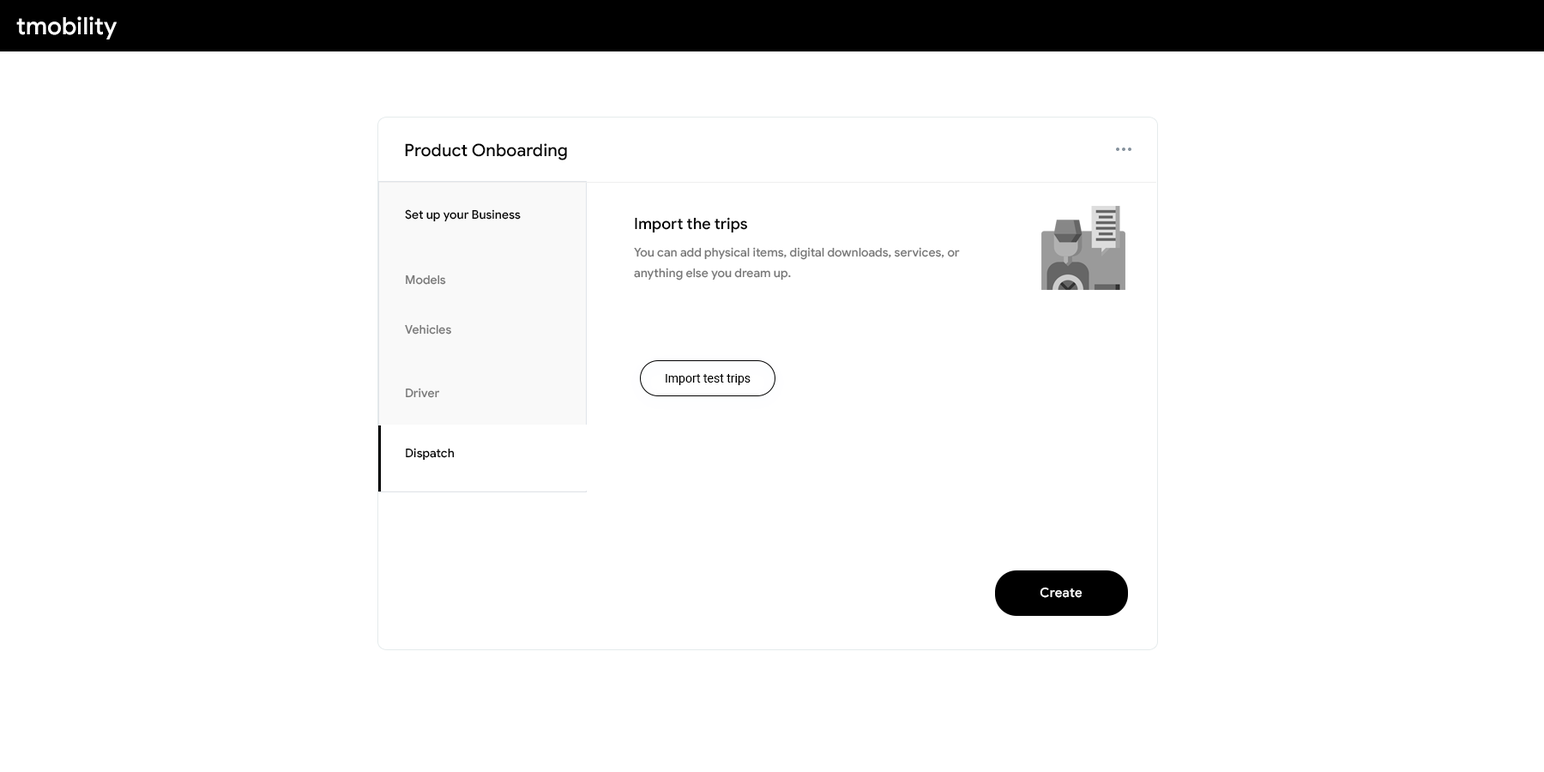
<style>
.page{position:relative;width:1544px;height:772px;background:#ffffff}
.page>*{position:absolute;margin:0}
.t1{font:24px "GoogleSans-Medium";color:#ffffff}
.t2{font:17.2px "GoogleSans-Medium";color:#000000}
.t3{font:12px "GoogleSans-Medium";color:#000000}
.t4{font:15.4px "GoogleSans-Medium";color:#000000}
.t5{font:12px/20.6px "GoogleSans-Medium";color:#777777}
.t6{font:12px "GoogleSans-Medium";color:#777777}
.t7{font:12px "Roboto-Regular";color:#000000}
.t8{font:12.9px "GoogleSans-Medium";letter-spacing:0.01em;color:#ffffff}
</style>
<div class="page">
<p class="t1" style="left:16px;top:16px;width:101px;height:23px">tmobility</p>
<p class="t2" style="left:405px;top:143px;width:162px;height:17px">Product Onboarding</p>
<p class="t3" style="left:405px;top:209px;width:116px;height:13px">Set up your Business</p>
<p class="t4" style="left:635px;top:217px;width:113px;height:16px">Import the trips</p>
<p class="t5" style="left:634px;top:247px;width:326px;height:34px">You can add physical items, digital downloads, services, or anything else you dream up.</p>
<p class="t6" style="left:406px;top:275px;width:40px;height:10px">Models</p>
<p class="t6" style="left:405px;top:324px;width:46px;height:11px">Vehicles</p>
<p class="t7" style="left:666px;top:374px;width:85px;height:11px">Import test trips</p>
<p class="t6" style="left:406px;top:388px;width:34px;height:10px">Driver</p>
<p class="t3" style="left:406px;top:448px;width:49px;height:13px">Dispatch</p>
<p class="t8" style="left:1040px;top:587px;width:43px;height:11px">Create</p>
</div>
